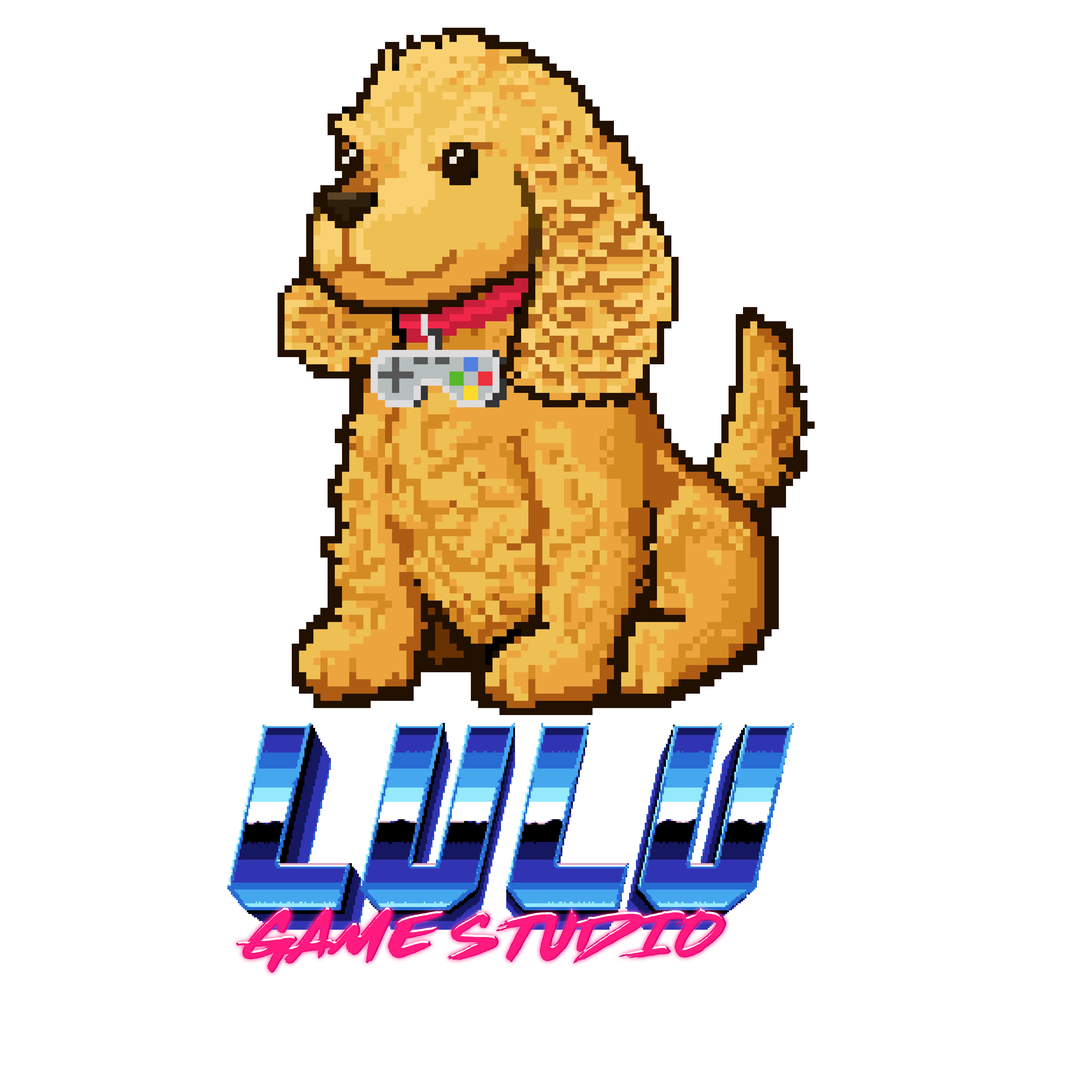
<style>
.page{position:relative;width:1092px;height:1092px;background:#ffffff}
.page>*{position:absolute;margin:0}
.t1{font:66.3px "DeadStock";color:#ff1a7f}
</style>
<div class="page">
<p class="t1" style="left:236px;top:906px;width:490px;height:67px">GAME STUDIO</p>
</div>
